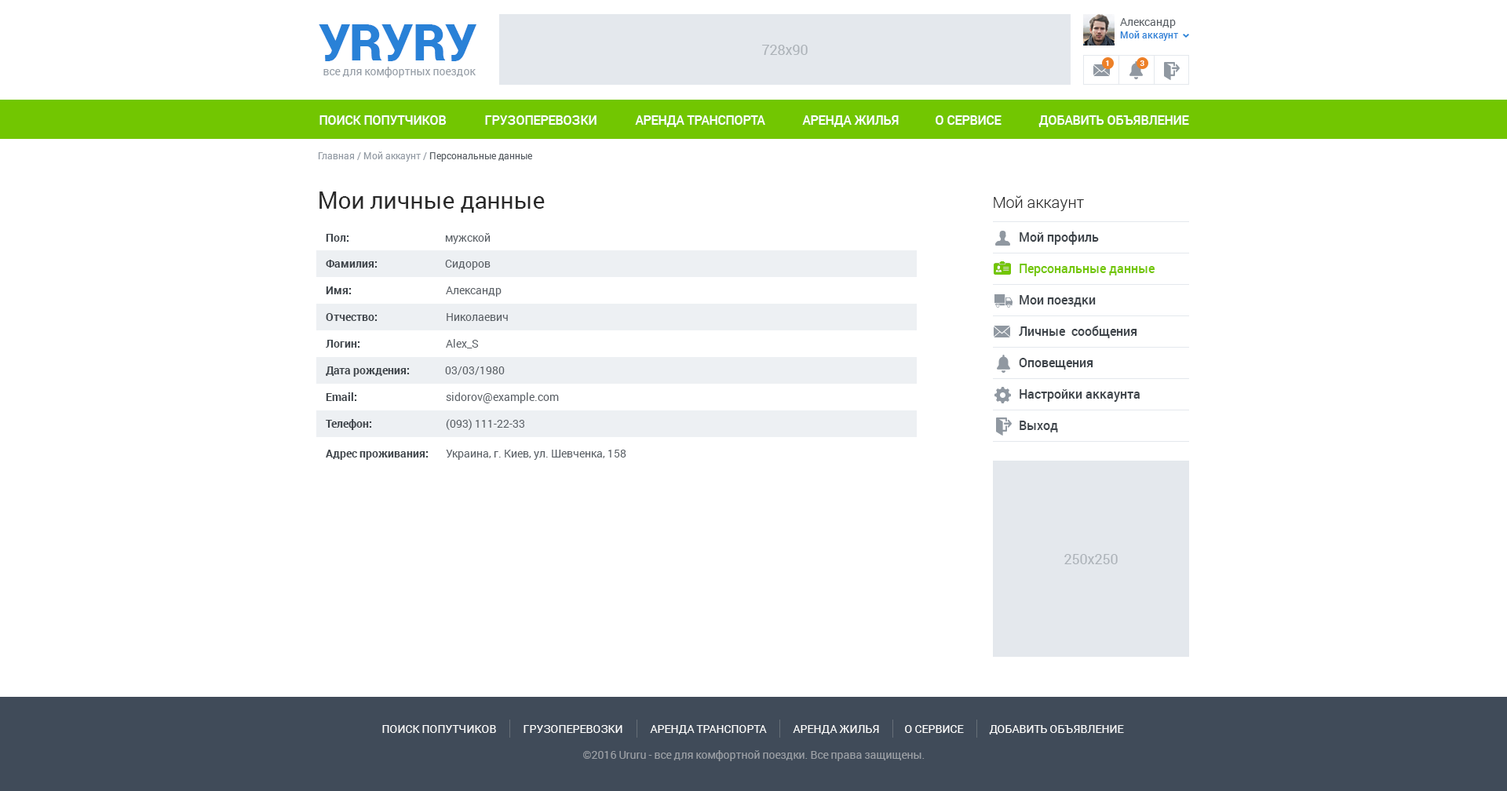
<style>
.page{position:relative;width:1507px;height:791px;background:#ffffff}
.page>*{position:absolute;margin:0}
.t1{font:50.2px "Roboto-Black";letter-spacing:-0.01em;color:#2981d7}
.t2{font:11px "Roboto-Regular";color:#585e64}
.t3{font:9.4px "Roboto-Medium";color:#2981d7}
.t4{font:14.1px "Roboto-Regular";color:#acb2b8}
.t5{font:7.8px "Roboto-Medium";color:#ffffff}
.t6{font:11px "Roboto-Regular";color:#949ca5}
.t7{font:12.6px "Roboto-Medium";color:#ffffff;text-transform:uppercase}
.t8{font:9.4px "Roboto-Regular";color:#949ca5}
.t9{font:9.4px "Roboto-Regular";color:#585e64}
.t10{font:23.5px "Roboto-Regular";color:#2a2a2a}
.t11{font:15.7px "Roboto-Light";color:#2a2a2a}
.t12{font:11px "Roboto-Bold";color:#3f454b}
.t13{font:12.6px "Roboto-Medium";color:#3f454b}
.t14{font:12.6px "Roboto-Medium";color:#72c601}
.t15{font:11px "Roboto-Regular";color:#ffffff;text-transform:uppercase}
.t16{font:11px "Roboto-Regular";color:#9ca0a6}
</style>
<div class="page">
<p class="t1" style="left:319px;top:24px;width:157px;height:37px">УRУRУ</p>
<p class="t2" style="left:1120px;top:18px;width:56px;height:10px">Александр</p>
<p class="t3" style="left:1120px;top:31px;width:58px;height:10px">Мой аккаунт</p>
<p class="t4" style="left:762px;top:45px;width:46px;height:10px">728x90</p>
<p class="t5" style="left:1106px;top:60px;width:3px;height:6px">1</p>
<p class="t5" style="left:1140px;top:60px;width:4px;height:6px">3</p>
<p class="t6" style="left:323px;top:67px;width:153px;height:11px">все для комфортных поездок</p>
<p class="t7" style="left:319px;top:115px;width:128px;height:10px">Поиск попутчиков</p>
<p class="t7" style="left:485px;top:115px;width:112px;height:10px">грузоперевозки</p>
<p class="t7" style="left:635px;top:115px;width:130px;height:12px">Аренда транспорта</p>
<p class="t7" style="left:802px;top:115px;width:97px;height:12px">Аренда жилья</p>
<p class="t7" style="left:936px;top:115px;width:66px;height:10px">о сервисе</p>
<p class="t7" style="left:1038px;top:115px;width:151px;height:12px">добавить объявление</p>
<p class="t8" style="left:318px;top:151px;width:214px;height:11px">Главная / Мой аккаунт / <span class="t9">Персональные данные</span></p>
<p class="t10" style="left:319px;top:192px;width:226px;height:21px">Мои личные данные</p>
<p class="t11" style="left:994px;top:195px;width:90px;height:16px">Мой аккаунт</p>
<p class="t12" style="left:326px;top:234px;width:23px;height:8px">Пол:</p>
<p class="t2" style="left:445px;top:233px;width:46px;height:11px">мужской</p>
<p class="t13" style="left:1020px;top:232px;width:79px;height:13px">Мой профиль</p>
<p class="t12" style="left:326px;top:260px;width:52px;height:8px">Фамилия:</p>
<p class="t2" style="left:445px;top:260px;width:46px;height:10px">Сидоров</p>
<p class="t14" style="left:1020px;top:264px;width:135px;height:12px">Персональные данные</p>
<p class="t12" style="left:326px;top:287px;width:26px;height:7px">Имя:</p>
<p class="t2" style="left:446px;top:287px;width:56px;height:10px">Александр</p>
<p class="t13" style="left:1020px;top:295px;width:76px;height:12px">Мои поездки</p>
<p class="t12" style="left:326px;top:313px;width:52px;height:8px">Отчество:</p>
<p class="t2" style="left:447px;top:313px;width:61px;height:8px">Николаевич</p>
<p class="t13" style="left:1019px;top:326px;width:118px;height:12px">Личные  сообщения</p>
<p class="t12" style="left:326px;top:340px;width:34px;height:8px">Логин:</p>
<p class="t2" style="left:446px;top:339px;width:33px;height:10px">Alex_S</p>
<p class="t13" style="left:1019px;top:358px;width:74px;height:12px">Оповещения</p>
<p class="t12" style="left:326px;top:367px;width:84px;height:10px">Дата рождения:</p>
<p class="t2" style="left:445px;top:367px;width:60px;height:8px">03/03/1980</p>
<p class="t13" style="left:1020px;top:389px;width:120px;height:13px">Настройки аккаунта</p>
<p class="t12" style="left:326px;top:392px;width:31px;height:9px">Email:</p>
<p class="t2" style="left:446px;top:392px;width:113px;height:11px">sidorov@example.com</p>
<p class="t12" style="left:326px;top:419px;width:46px;height:11px">Телефон:</p>
<p class="t2" style="left:446px;top:419px;width:78px;height:11px">(093) 111-22-33</p>
<p class="t13" style="left:1020px;top:421px;width:38px;height:12px">Выход</p>
<p class="t12" style="left:326px;top:450px;width:103px;height:10px">Адрес проживания:</p>
<p class="t2" style="left:446px;top:450px;width:180px;height:10px">Украина, г. Киев, ул. Шевченка, 158</p>
<p class="t4" style="left:1064px;top:554px;width:54px;height:10px">250х250</p>
<p class="t15" style="left:382px;top:725px;width:114px;height:8px">Поиск попутчиков</p>
<p class="t15" style="left:524px;top:725px;width:98px;height:8px">грузоперевозки</p>
<p class="t15" style="left:650px;top:725px;width:117px;height:10px">Аренда транспорта</p>
<p class="t15" style="left:793px;top:725px;width:86px;height:10px">Аренда жилья</p>
<p class="t15" style="left:905px;top:725px;width:59px;height:8px">о сервисе</p>
<p class="t15" style="left:989px;top:725px;width:135px;height:10px">добавить объявление</p>
<p class="t16" style="left:583px;top:750px;width:342px;height:11px">©2016 Ururu - все для комфортной поездки. Все права защищены.</p>
</div>
